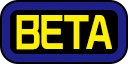
<style>
.page{position:relative;width:128px;height:64px;background:#000000}
.page>*{position:absolute;margin:0}
.t1{font:38.3px "KafuTechnoStd-U";color:#fff100;scale:0.75 1}
</style>
<div class="page">
<p class="t1" style="left:16px;top:15px;width:96px;height:35px">BETA</p>
</div>
